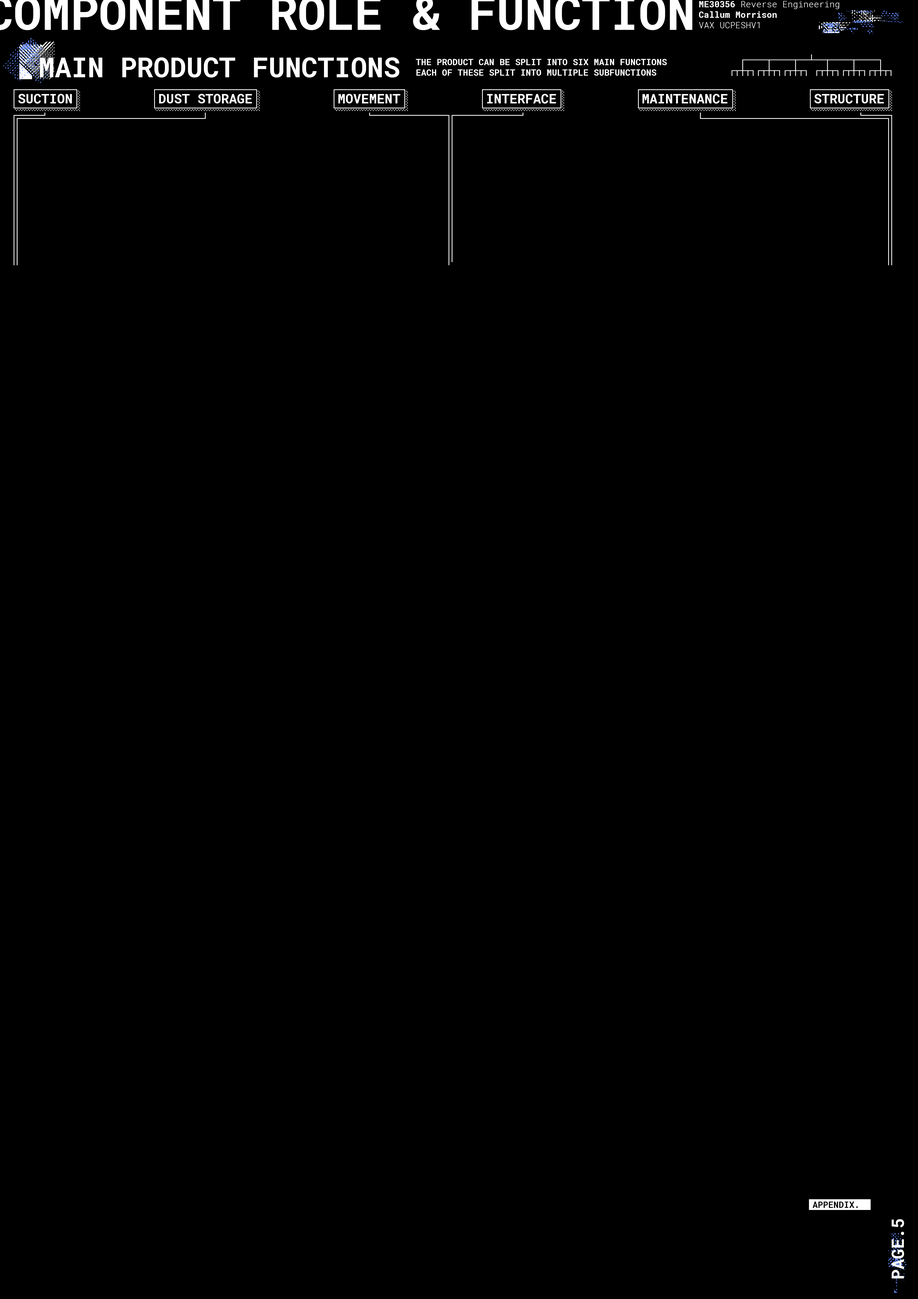
<style>
.page{position:relative;width:918px;height:1299px;background:#000000}
.page>*{position:absolute;margin:0}
.t1{font:8.7px "RobotoMono-Light";color:#ffffff}
.t2{font:8.7px "RobotoMono-Bold";color:#ffffff}
.t3{font:27.4px "RobotoMono-Bold";color:#ffffff}
.t4{font:8.7px "RobotoMono-Bold";color:#ffffff;text-transform:uppercase}
.t5{font:8.7px/10.9px "Hack-Regular";color:#ffffff;text-transform:uppercase}
.t6{font:13.1px "RobotoMono-Bold";color:#ffffff;text-transform:uppercase}
.t7{font:8.7px "RobotoMono-Bold";color:#000000}
.t8{font:17.1px "RobotoMono-Bold";color:#ffffff}
</style>
<div class="page">
<p class="t1" style="left:699px;top:1px;width:140px;height:27px"><span class="t2">ME30356 </span>Reverse Engineering<br><span class="t2">Callum Morrison<br></span>VAX UCPESHV1</p>
<p class="t3" style="left:40px;top:57px;width:359px;height:20px">MAIN PRODUCT FUNCTIONS</p>
<p class="t4" style="left:416px;top:59px;width:251px;height:17px">The product can be split into six main functions<br>each of these split into multiple subfunctions</p>
<p class="t5" style="left:732px;top:54px;width:160px;height:22px">┌────┬────┬──┴──┬────┬────┐<br>┌┬┼┬┐┌┬┼┬┐┌┬┼┬┐ ┌┬┼┬┐┌┬┼┬┐┌┬┼┬┐</p>
<p class="t6" style="left:18px;top:94px;width:54px;height:10px">SUCTION</p>
<p class="t6" style="left:159px;top:94px;width:93px;height:9px">DUST STORAGE</p>
<p class="t6" style="left:338px;top:94px;width:62px;height:9px">MOVEMENT</p>
<p class="t6" style="left:487px;top:94px;width:69px;height:10px">INTERFACE</p>
<p class="t6" style="left:643px;top:94px;width:85px;height:10px">MAINTENANCE</p>
<p class="t6" style="left:815px;top:94px;width:69px;height:10px">STRUCTURE</p>
<p class="t7" style="left:813px;top:1201px;width:45px;height:6px">APPENDIX.</p>
<p class="t8" style="left:892px;top:1219px;width:12px;height:59px;rotate:-90deg">PAGE.5</p>
</div>
